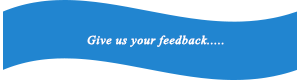
<style>
.page{position:relative;width:300px;height:80px;background:#2185d0}
.page>*{position:absolute;margin:0}
.t1{font:12px "TimesNewRomanPS-ItalicMT";letter-spacing:0.025em;color:#ffffff;font-weight:bold}
</style>
<div class="page">
<p class="t1" style="left:87px;top:35px;width:137px;height:12px">Give us your feedback.....</p>
</div>
